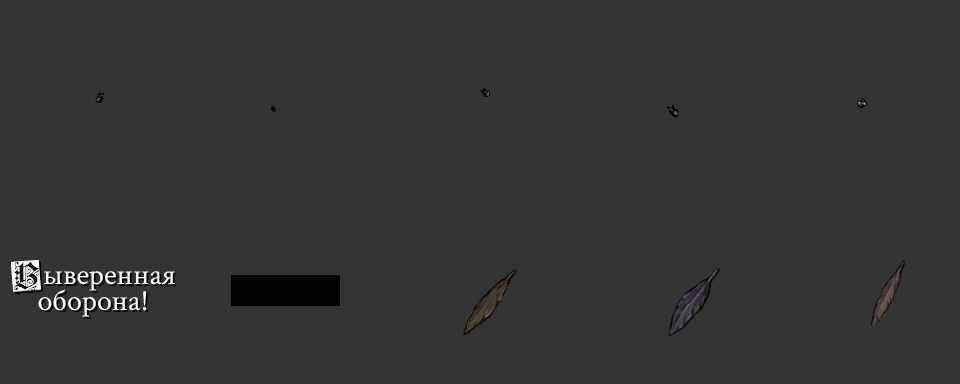
<style>
.page{position:relative;width:960px;height:384px;background:#333333}
.page>*{position:absolute;margin:0}
.t1{font:35.9px "FortunaGothicFlorishC";color:#141418}
.t2{font:29.9px "CrimsonText-Regular";color:#ffffff}
.t3{font:30.2px "CrimsonText-Regular";color:#ffffff}
</style>
<div class="page">
<p class="t1" style="left:14px;top:262px;width:25px;height:29px">В</p>
<p class="t2" style="left:44px;top:271px;width:131px;height:20px">ыверенная</p>
<p class="t3" style="left:38px;top:289px;width:109px;height:28px">оборона!</p>
</div>
